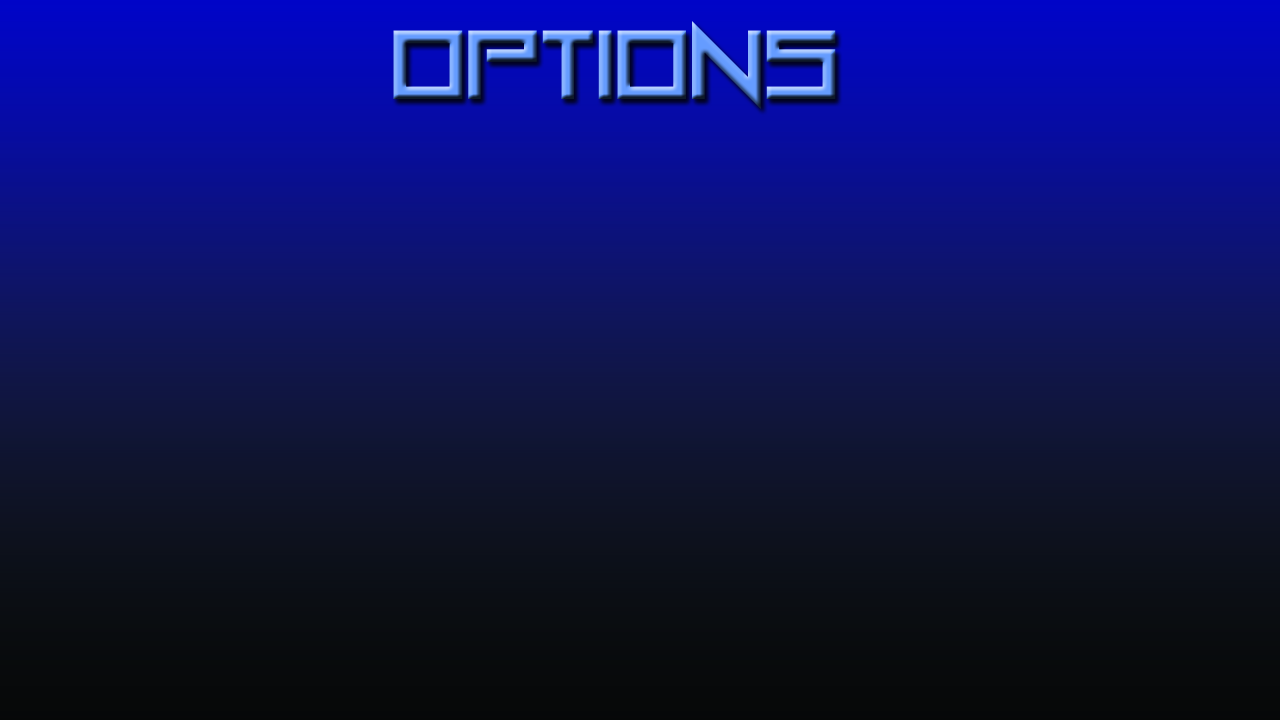
<style>
.page{position:relative;width:1280px;height:720px}
.page>*{position:absolute;margin:0}
.t1{font:199px "Gang-Wolfik"}
</style>
<div class="page">
<p class="t1" style="left:393px;top:21px;width:443px;height:88px">options</p>
</div>
